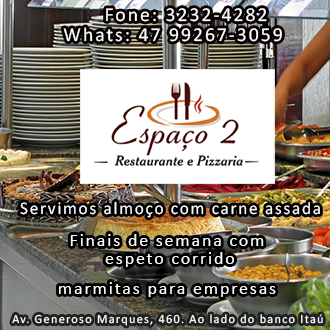
<style>
.page{position:relative;width:330px;height:330px}
.page>*{position:absolute;margin:0}
.t1{font:19.8px/19.8px "Calibri";letter-spacing:0.1em;color:#fcfbfb}
.t2{font:17.8px "Calibri";letter-spacing:0.1em;color:#fcfbfb;scale:0.97 1}
.t3{font:18px/18px "Calibri";letter-spacing:0.1em;color:#fcfbfb}
.t4{font:18px "Calibri";letter-spacing:0.1em;color:#fcfbfb}
.t5{font:12.4px "Calibri";letter-spacing:0.1em;color:#fcfbfb}
</style>
<div class="page">
<p class="t1" style="left:63px;top:8px;width:219px;height:34px;text-align:center">Fone: 3232-4282<br>Whats: 47 99267-3059</p>
<p class="t2" style="left:20px;top:201px;width:300px;height:17px">Servimos almoço com carne assada</p>
<p class="t3" style="left:70px;top:234px;width:194px;height:33px;text-align:center">Finais de semana com<br> espeto corrido</p>
<p class="t4" style="left:59px;top:282px;width:217px;height:15px">marmitas para empresas</p>
<p class="t5" style="left:12px;top:314px;width:311px;height:12px">Av. Generoso Marques, 460. Ao lado do banco Itaú</p>
</div>
